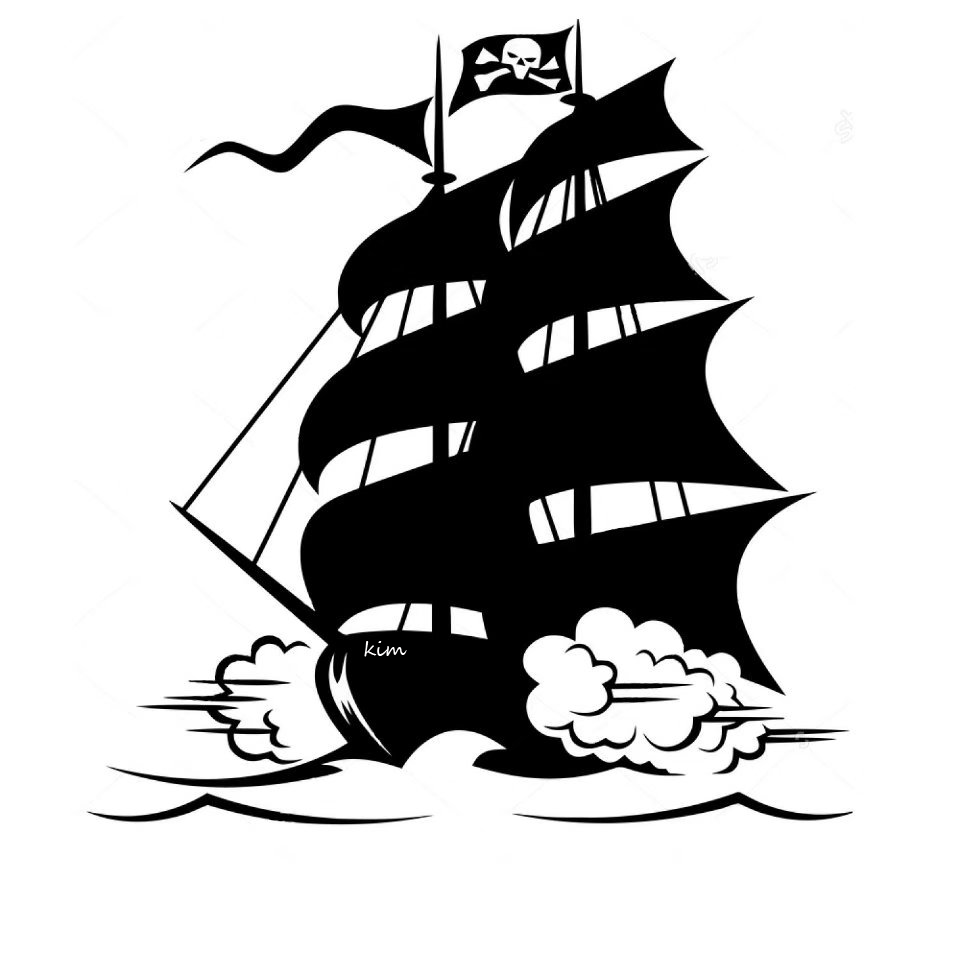
<style>
.page{position:relative;width:959px;height:959px;background:#ffffff}
.page>*{position:absolute;margin:0}
.t1{font:20px "SegoeScript";color:#fffefe}
.t2{font:12px "SimSun";color:#000000}
</style>
<div class="page">
<p class="t1" style="left:364px;top:641px;width:43px;height:16px"><span class="t2">   </span>kim</p>
</div>
